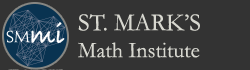
<style>
.page{position:relative;width:250px;height:70px;background:#333333}
.page>*{position:absolute;margin:0}
.t1{font:22.4px "Garamond";color:#d8d8d0}
.t2{font:24.8px "Garamond";color:#d8d8d0;text-transform:uppercase}
</style>
<div class="page">
<p class="t1" style="left:78px;top:13px;width:122px;height:45px"><span class="t2">St. Mark’s<br></span>Math Institute</p>
</div>
